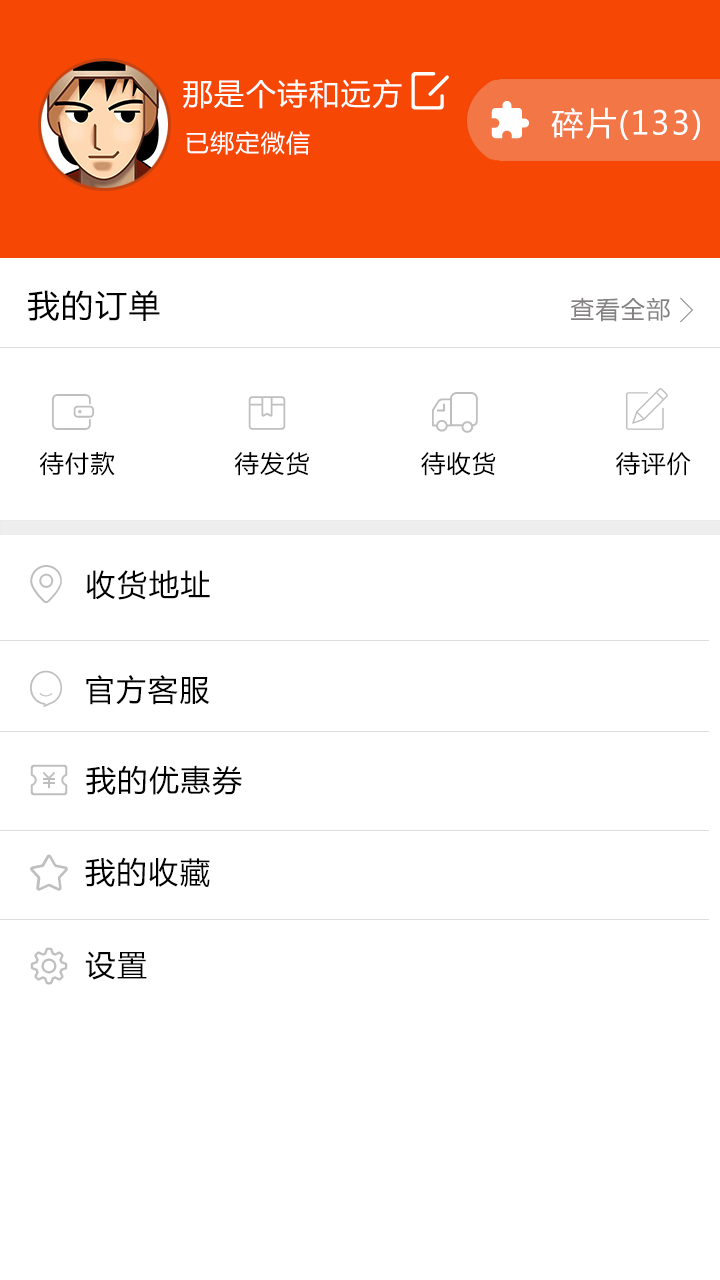
<style>
.page{position:relative;width:720px;height:1280px;background:#ffffff}
.page>*{position:absolute;margin:0}
.t1{font:30px "MicrosoftYaHei";letter-spacing:0.055em;color:#ffffff;text-transform:uppercase}
.t2{font:32px "MicrosoftYaHei";letter-spacing:0.055em;color:#ffffff;text-transform:uppercase}
.t3{font:24px "MicrosoftYaHei";letter-spacing:0.055em;color:#ffffff;text-transform:uppercase}
.t4{font:31.9px "MicrosoftYaHei";letter-spacing:0.055em;color:#000000;text-transform:uppercase}
.t5{font:24px "MicrosoftYaHei";letter-spacing:0.055em;color:#848181;text-transform:uppercase}
.t6{font:24px "MicrosoftYaHei";letter-spacing:0.055em;color:#000000;text-transform:uppercase}
.t7{font:30px "MicrosoftYaHei";letter-spacing:0.055em;color:#000000;text-transform:uppercase}
</style>
<div class="page">
<p class="t1" style="left:183px;top:79px;width:219px;height:30px">那是个诗和远方</p>
<p class="t2" style="left:551px;top:107px;width:149px;height:33px">碎片(133)</p>
<p class="t3" style="left:186px;top:131px;width:124px;height:24px">已绑定微信</p>
<p class="t4" style="left:28px;top:290px;width:132px;height:31px">我的订单</p>
<p class="t5" style="left:570px;top:297px;width:100px;height:25px">查看全部</p>
<p class="t6" style="left:39px;top:451px;width:652px;height:25px">待付款              待发货             待收货              待评价</p>
<p class="t7" style="left:86px;top:570px;width:124px;height:30px">收货地址</p>
<p class="t7" style="left:86px;top:675px;width:124px;height:30px">官方客服</p>
<p class="t7" style="left:86px;top:765px;width:156px;height:30px">我的优惠券</p>
<p class="t7" style="left:85px;top:857px;width:125px;height:31px">我的收藏</p>
<p class="t7" style="left:85px;top:951px;width:62px;height:29px">设置</p>
</div>
